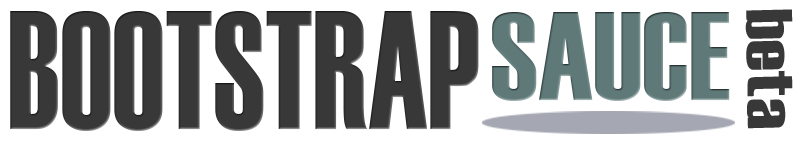
<style>
.page{position:relative;width:810px;height:141px;background:#ffffff}
.page>*{position:absolute;margin:0}
.t1{font:168.2px "Haettenschweiler";color:#383838;scale:0.81 1}
.t2{font:125.4px "Haettenschweiler";color:#5e7978}
.t3{font:65.4px "Haettenschweiler";color:#383838;scale:1.34 1}
</style>
<div class="page">
<p class="t1" style="left:10px;top:11px;width:469px;height:120px">BOOTSTRAP</p>
<p class="t2" style="left:492px;top:12px;width:238px;height:89px">SAUCE</p>
<p class="t3" style="left:745px;top:9px;width:48px;height:120px;rotate:89deg">beta</p>
</div>
